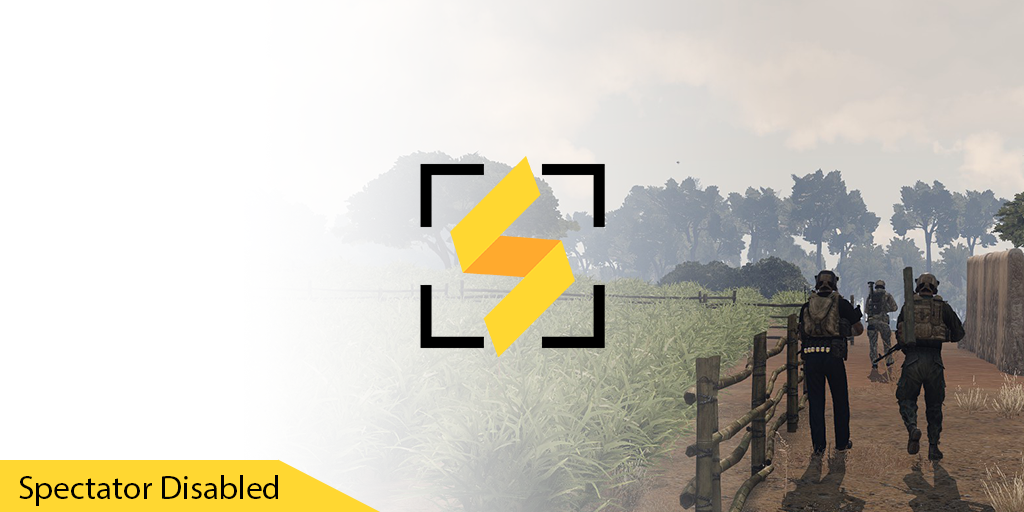
<style>
.page{position:relative;width:1024px;height:512px;background:#ffffff}
.page>*{position:absolute;margin:0}
.t1{font:33.3px "MyriadPro-Regular";color:#000000}
</style>
<div class="page">
<p class="t1" style="left:19px;top:475px;width:259px;height:31px">Spectator Disabled</p>
</div>
